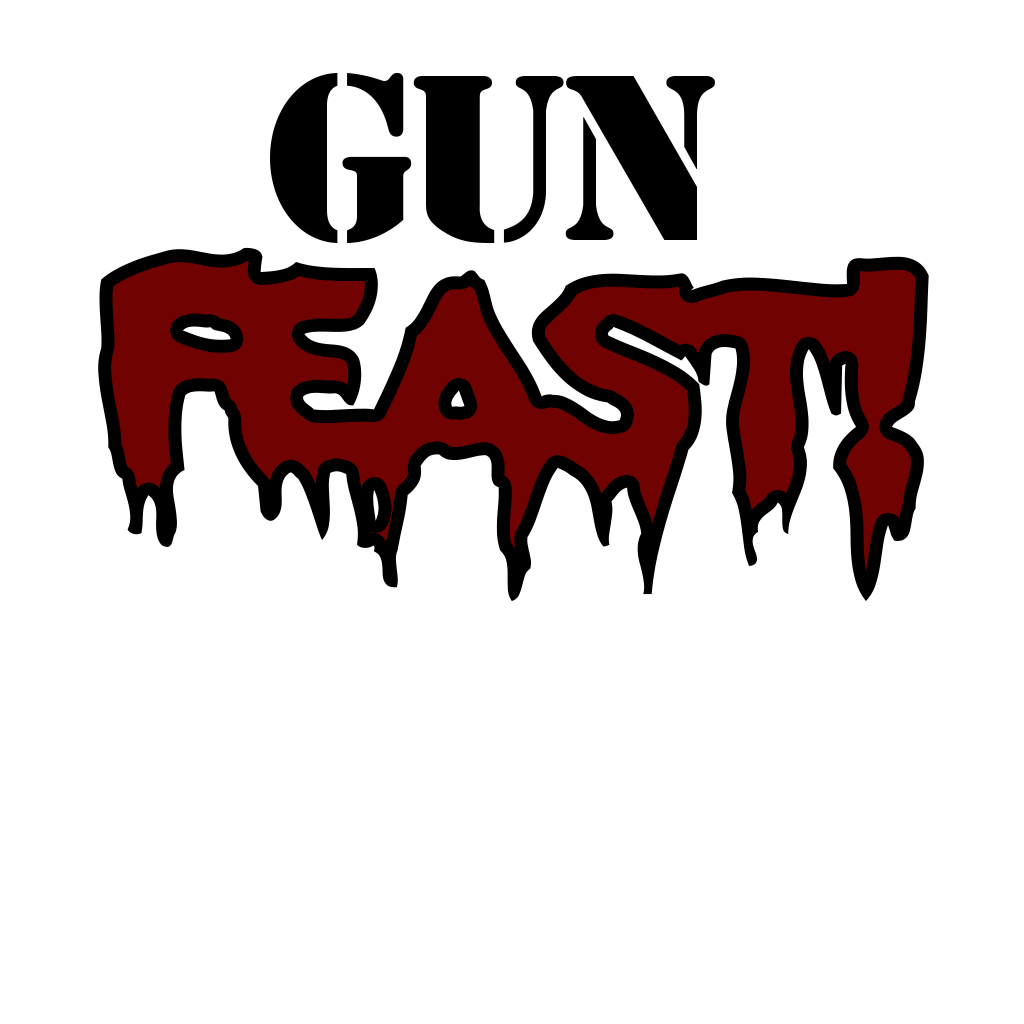
<style>
.page{position:relative;width:1024px;height:1024px;background:#ffffff}
.page>*{position:absolute;margin:0}
.t1{font:219px "StencilStd";letter-spacing:-0.06em;color:#000000}
.t2{font:372px "ROCKYAOE";letter-spacing:-0.06em}
.t3{font:400px "ROCKYAOE";letter-spacing:-0.06em}
.t4{font:394px "ROCKYAOE";letter-spacing:-0.06em}
</style>
<div class="page">
<p class="t1" style="left:270px;top:73px;width:445px;height:171px">GUN</p>
<p class="t2" style="left:98px;top:247px;width:831px;height:354px"><span class="t3">F</span>east<span class="t4">!</span></p>
</div>
